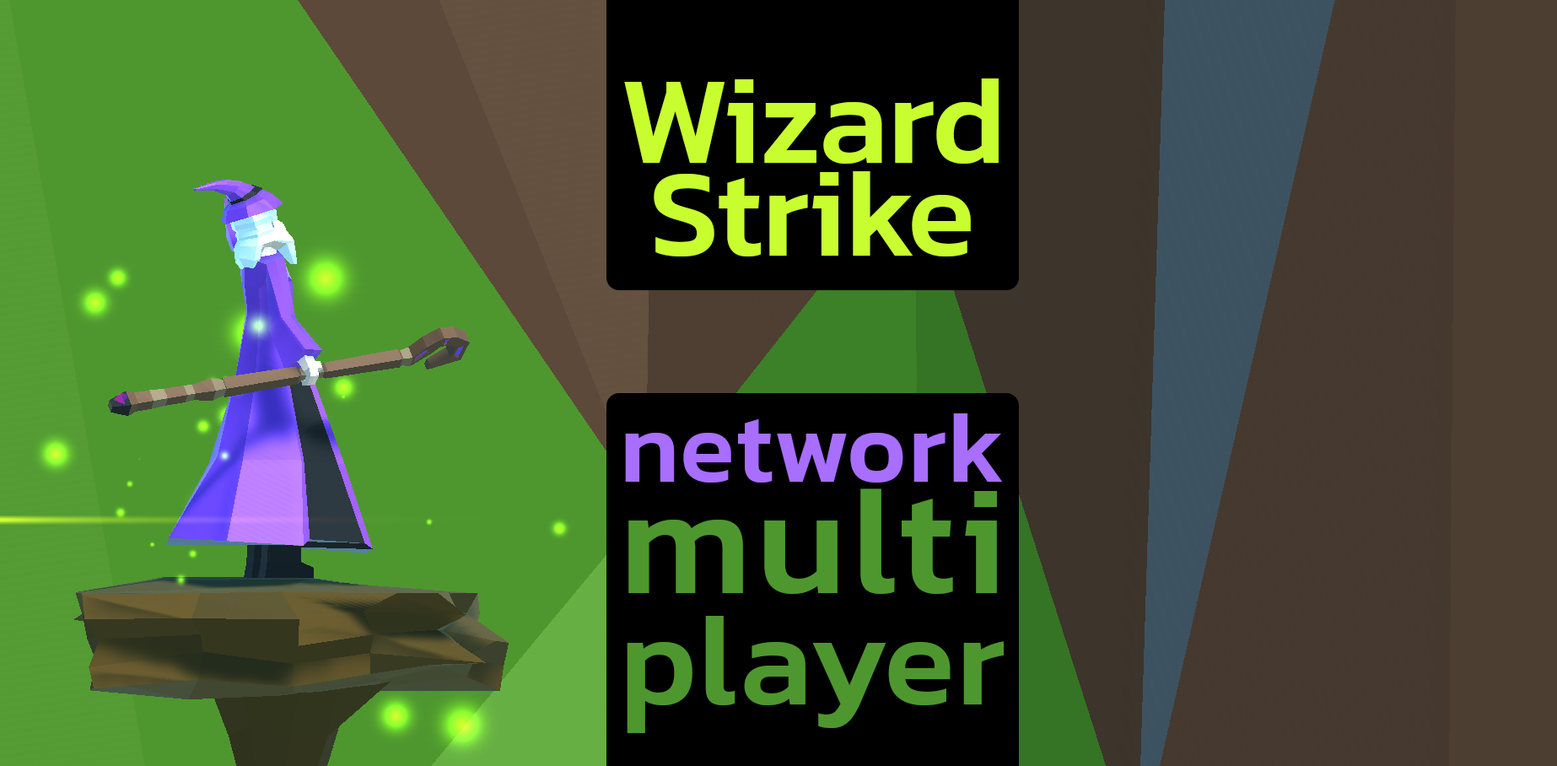
<style>
.page{position:relative;width:1557px;height:766px}
.page>*{position:absolute;margin:0}
.t1{font:124.8px/93.3px "Kanit-Medium";color:#c8fe2f}
.t2{font:101.2px/106.8px "Kanit-Medium";color:#a86efe}
.t3{font:152.9px/111.3px "Kanit-Medium";color:#4e972f}
.t4{font:130.5px/111.3px "Kanit-Medium";color:#4e972f}
</style>
<div class="page">
<p class="t1" style="left:624px;top:78px;width:375px;height:178px;text-align:center">Wizard<br>Strike</p>
<p class="t2" style="left:625px;top:413px;width:379px;height:320px;text-align:justify">network<br><span class="t3">multi<br></span><span class="t4">player</span></p>
</div>
